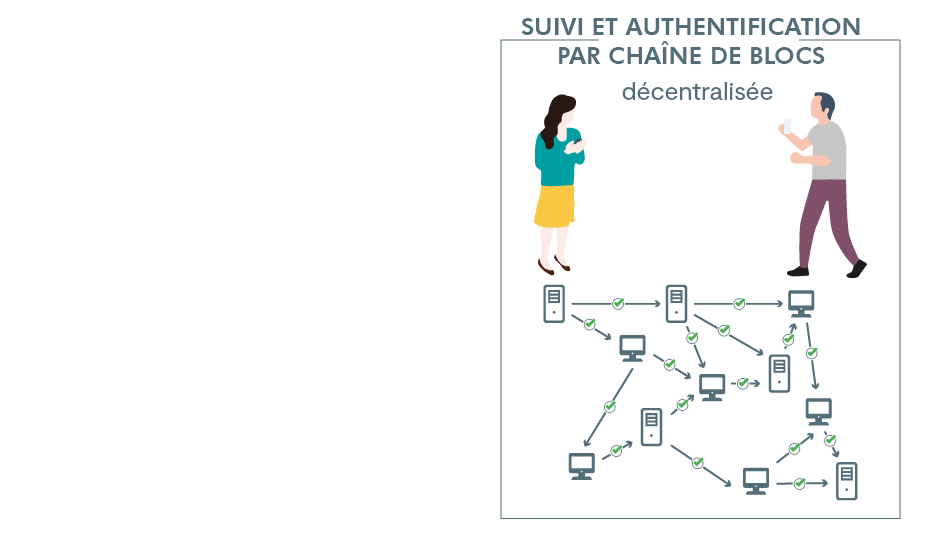
<style>
.page{position:relative;width:931px;height:550px;background:#ffffff}
.page>*{position:absolute;margin:0}
.t1{font:24px "FuturaBT-Heavy";color:#546e79}
</style>
<div class="page">
<p class="t1" style="left:521px;top:18px;width:339px;height:46px;text-align:center">SUIVI ET AUTHENTIFICATION <br>PAR CHAÎNE DE BLOCS</p>
</div>
